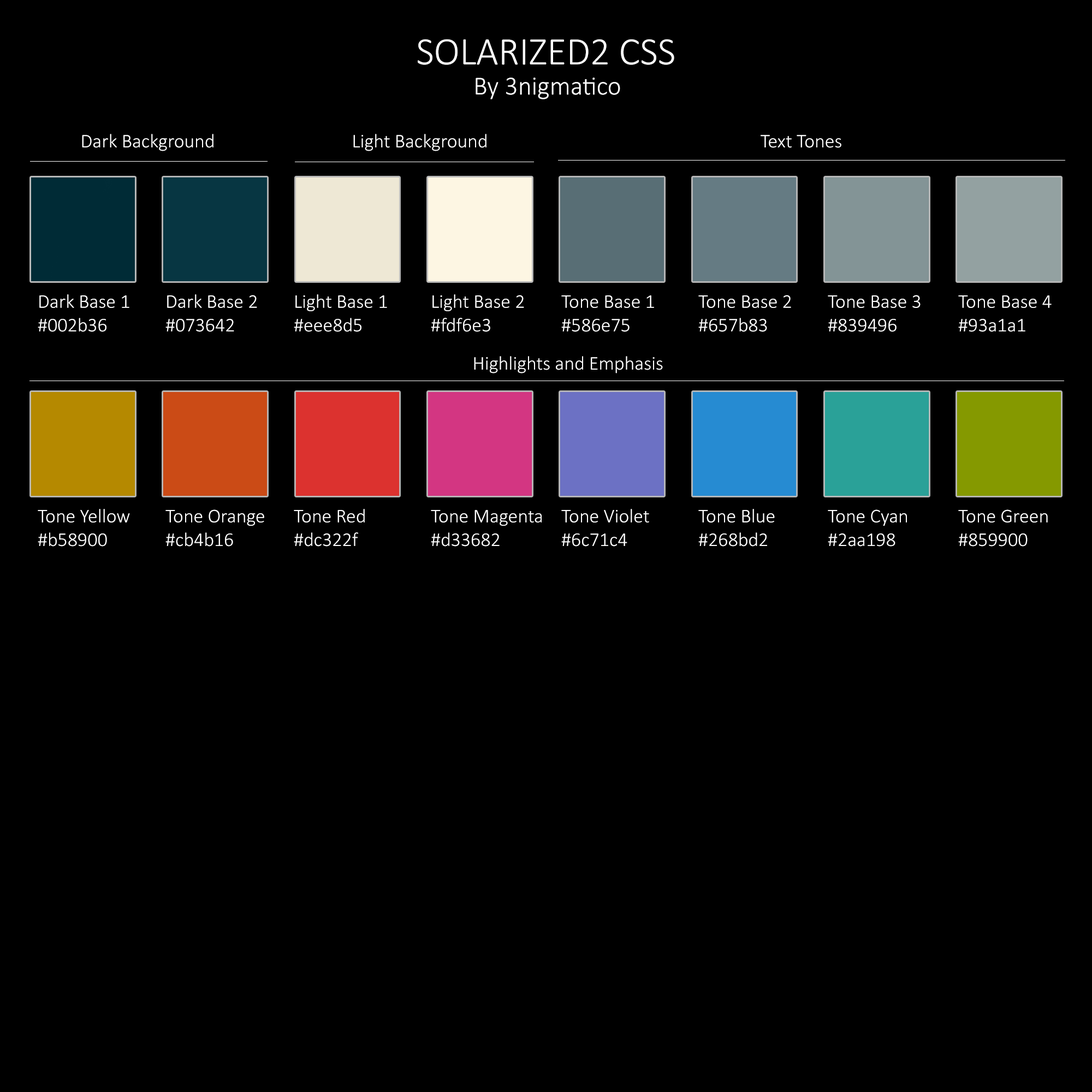
<style>
.page{position:relative;width:1092px;height:1092px;background:#000000}
.page>*{position:absolute;margin:0}
.t1{font:39.3px "Calibri-Light";color:#ffffff}
.t2{font:26.2px "Calibri-Light";color:#ffffff}
.t3{font:19.7px "Calibri-Light";color:#ffffff}
</style>
<div class="page">
<p class="t1" style="left:418px;top:39px;width:256px;height:26px">SOLARIZED2 CSS</p>
<p class="t2" style="left:476px;top:78px;width:144px;height:21px">By 3nigmatico</p>
<p class="t3" style="left:82px;top:134px;width:131px;height:17px">Dark Background</p>
<p class="t3" style="left:353px;top:134px;width:133px;height:17px">Light Background</p>
<p class="t3" style="left:761px;top:135px;width:80px;height:13px">Text Tones</p>
<p class="t3" style="left:38px;top:294px;width:91px;height:38px">Dark Base 1<br>#002b36</p>
<p class="t3" style="left:165px;top:294px;width:92px;height:38px">Dark Base 2<br>#073642</p>
<p class="t3" style="left:294px;top:294px;width:93px;height:38px">Light Base 1<br>#eee8d5</p>
<p class="t3" style="left:431px;top:294px;width:93px;height:38px">Light Base 2<br>#fdf6e3</p>
<p class="t3" style="left:561px;top:295px;width:93px;height:37px">Tone Base 1<br>#586e75</p>
<p class="t3" style="left:698px;top:295px;width:93px;height:37px">Tone Base 2<br>#657b83</p>
<p class="t3" style="left:828px;top:295px;width:93px;height:37px">Tone Base 3<br>#839496</p>
<p class="t3" style="left:958px;top:295px;width:94px;height:37px">Tone Base 4<br>#93a1a1</p>
<p class="t3" style="left:474px;top:356px;width:189px;height:17px">Highlights and Emphasis</p>
<p class="t3" style="left:38px;top:509px;width:92px;height:38px">Tone Yellow<br>#b58900</p>
<p class="t3" style="left:165px;top:509px;width:99px;height:38px">Tone Orange<br>#cb4b16</p>
<p class="t3" style="left:294px;top:509px;width:71px;height:38px">Tone Red<br>#dc322f</p>
<p class="t3" style="left:431px;top:510px;width:111px;height:37px">Tone Magenta<br>#d33682</p>
<p class="t3" style="left:561px;top:509px;width:88px;height:38px">Tone Violet<br>#6c71c4</p>
<p class="t3" style="left:698px;top:509px;width:77px;height:38px">Tone Blue<br>#268bd2</p>
<p class="t3" style="left:828px;top:509px;width:79px;height:38px">Tone Cyan<br>#2aa198</p>
<p class="t3" style="left:958px;top:509px;width:90px;height:38px">Tone Green<br>#859900</p>
</div>
